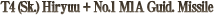
<style>
.page{position:relative;width:216px;height:15px;background:#ffffff}
.page>*{position:absolute;margin:0}
.t1{font:15px "RyuminPro-ExBold";letter-spacing:-0.08em;color:#4a3f32;font-weight:bold;scale:0.8 1}
</style>
<div class="page">
<p class="t1" style="left:0px;top:0px;width:214px;height:15px">T4 (Sk.) Hiryuu + No.1 M1A Guid. Missile</p>
</div>
